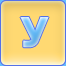
<style>
.page{position:relative;width:66px;height:66px}
.page>*{position:absolute;margin:0}
.t1{font:41px "Tahoma-Bold"}
</style>
<div class="page">
<p class="t1" style="left:20px;top:17px;width:29px;height:31px">У</p>
<p class="t1" style="left:20px;top:17px;width:29px;height:31px">У</p>
</div>
